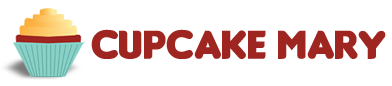
<style>
.page{position:relative;width:392px;height:86px;background:#ffffff}
.page>*{position:absolute;margin:0}
.t1{font:42.6px "Insaniburger-with-Cheese";color:#9e2520}
</style>
<div class="page">
<p class="t1" style="left:91px;top:29px;width:295px;height:30px">cupCake Mary</p>
</div>
